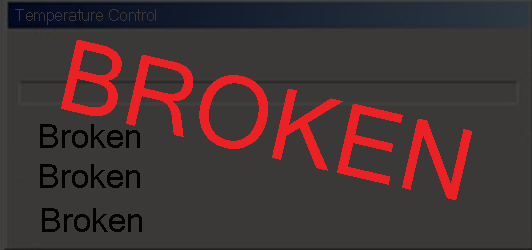
<style>
.page{position:relative;width:532px;height:250px;background:#3a3937}
.page>*{position:absolute;margin:0}
.t1{font:15.9px "MicrosoftSansSerif";color:#3a3937}
.t2{font:100px "MicrosoftSansSerif";color:#ed2024}
.t3{font:33.3px "MicrosoftSansSerif";color:#000000}
</style>
<div class="page">
<p class="t1" style="left:15px;top:9px;width:141px;height:16px">Temperature Control</p>
<p class="t2" style="left:61px;top:40px;width:411px;height:160px;rotate:13deg">BROKEN</p>
<p class="t3" style="left:40px;top:124px;width:100px;height:24px">Broken</p>
<p class="t3" style="left:40px;top:164px;width:100px;height:24px">Broken</p>
<p class="t3" style="left:42px;top:208px;width:100px;height:24px">Broken</p>
</div>
